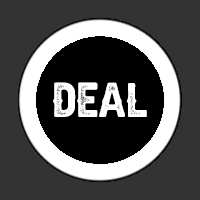
<style>
.page{position:relative;width:200px;height:200px;background:#333333}
.page>*{position:absolute;margin:0}
.t1{font:30px "AldivaroStampDemo-Stamp";color:#ffffff}
</style>
<div class="page">
<p class="t1" style="left:53px;top:82px;width:94px;height:35px">Deal</p>
</div>
